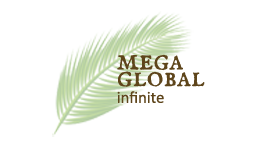
<style>
.page{position:relative;width:278px;height:150px;background:#ffffff}
.page>*{position:absolute;margin:0}
.t1{font:31.9px/16.7px "IM_FELL_English_SC";color:#5e451b}
.t2{font:16.7px/16.7px "Calibri";color:#5e451b}
</style>
<div class="page">
<p class="t1" style="left:117px;top:54px;width:88px;height:49px">mega<br>global<br><span class="t2">infinite</span></p>
</div>
